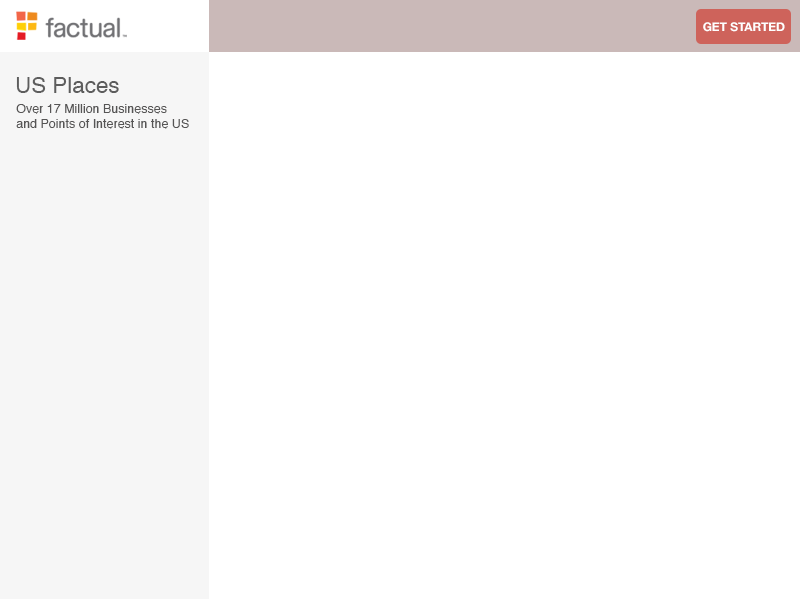
<style>
.page{position:relative;width:800px;height:600px;background:#ffffff}
.page>*{position:absolute;margin:0}
.t1{font:12px "HelveticaNeue-Bold";color:#ffffff}
.t2{font:22.4px "Helvetica";color:#5d5d5d}
.t3{font:12.5px "Helvetica";color:#565555}
</style>
<div class="page">
<p class="t1" style="left:703px;top:22px;width:82px;height:10px">GET STARTED</p>
<p class="t2" style="left:16px;top:77px;width:103px;height:16px">US Places</p>
<p class="t3" style="left:16px;top:104px;width:173px;height:25px">Over 17 Million Businesses <br>and Points of Interest in the US</p>
</div>
